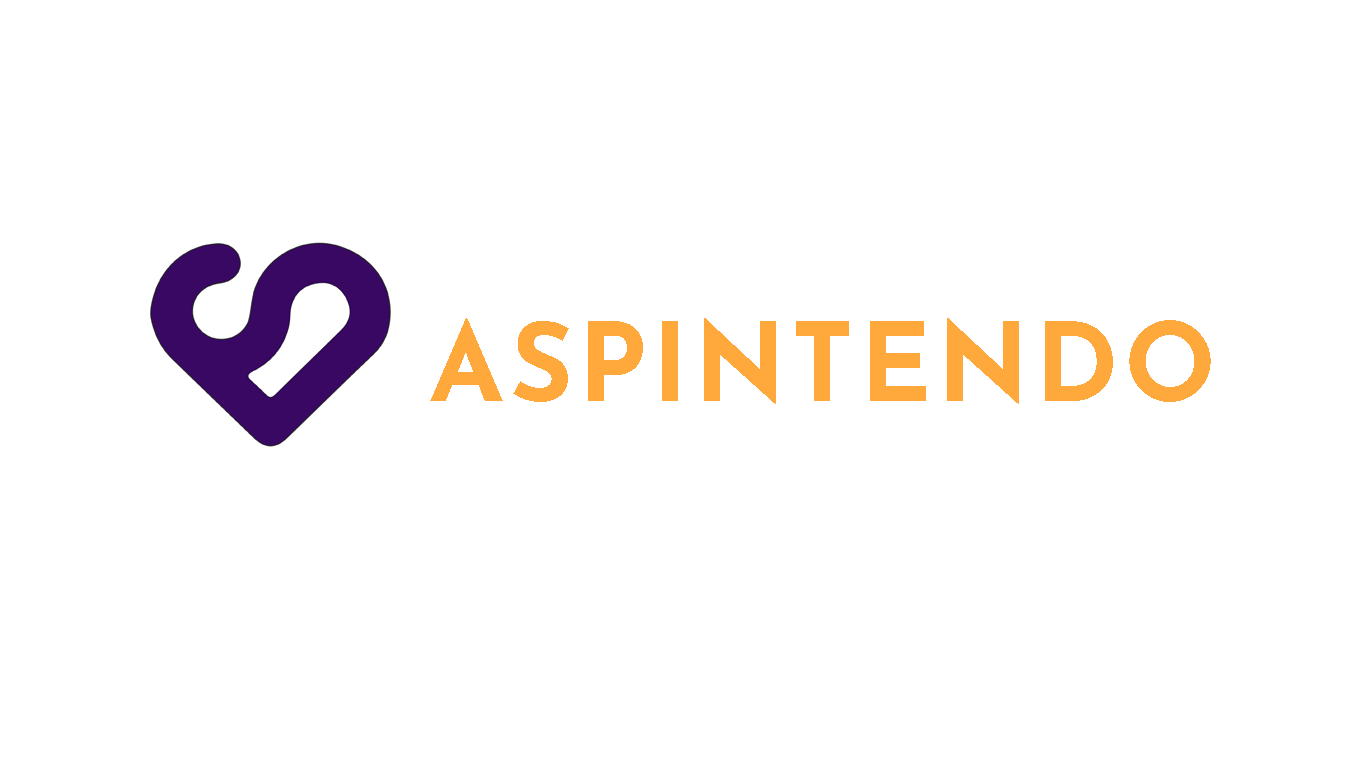
<style>
.page{position:relative;width:1366px;height:768px;background:#ffffff}
.page>*{position:absolute;margin:0}
.t1{font:108px "JosefinSans-Bold";letter-spacing:0.05em;color:#ffa83b}
</style>
<div class="page">
<p class="t1" style="left:430px;top:318px;width:781px;height:86px">ASPINTENDO</p>
</div>
